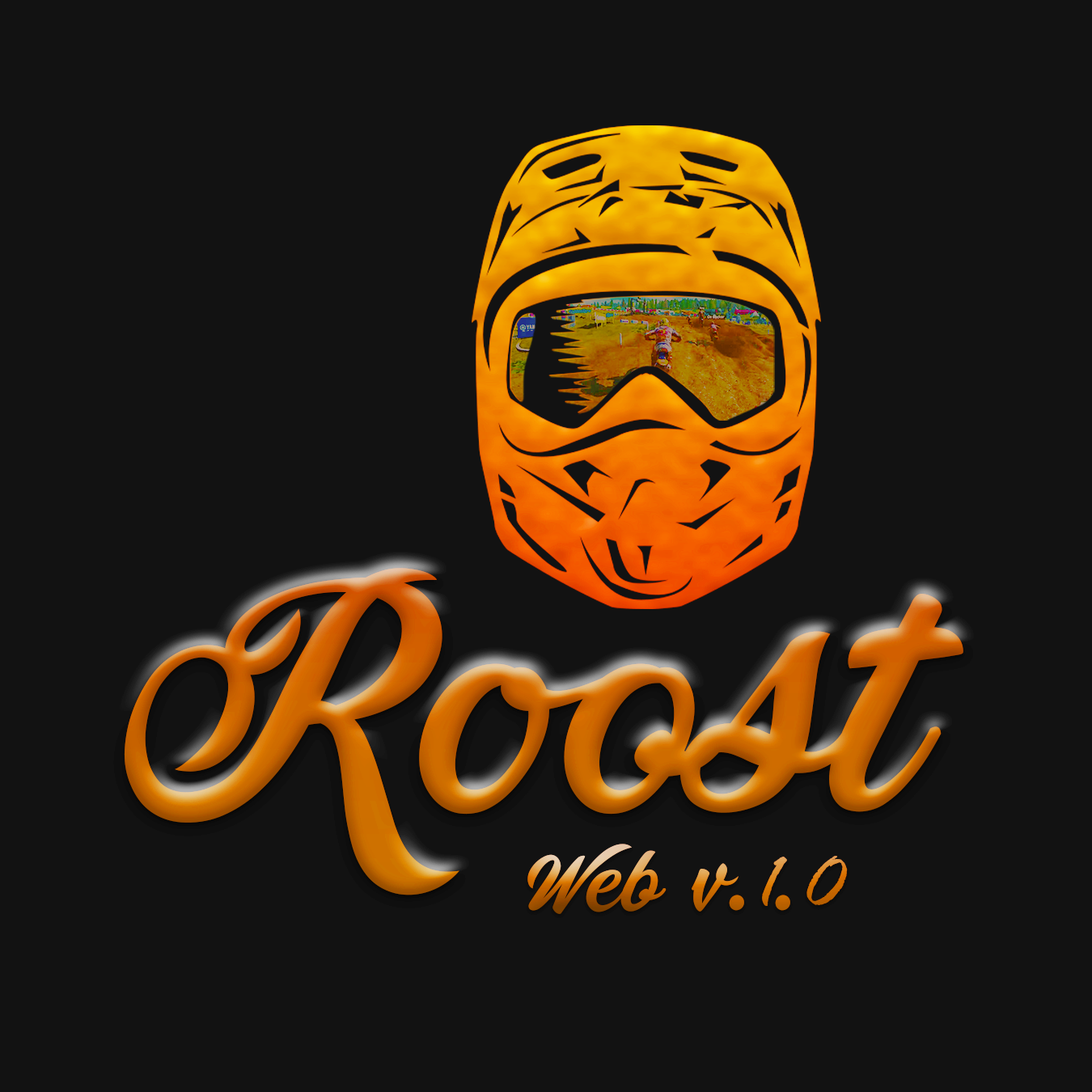
<style>
.page{position:relative;width:1092px;height:1092px;background:#121212}
.page>*{position:absolute;margin:0}
.t1{font:320.5px "PainterPERSONALUSEONLY"}
.t2{font:84px "PainterPERSONALUSEONLY"}
.t3{font:84px "RageItalic"}
</style>
<div class="page">
<p class="t1" style="left:124px;top:568px;width:839px;height:327px">Roost</p>
<p class="t2" style="left:527px;top:844px;width:321px;height:70px">Web v.<span class="t3">1</span>.<span class="t3">0</span></p>
</div>
